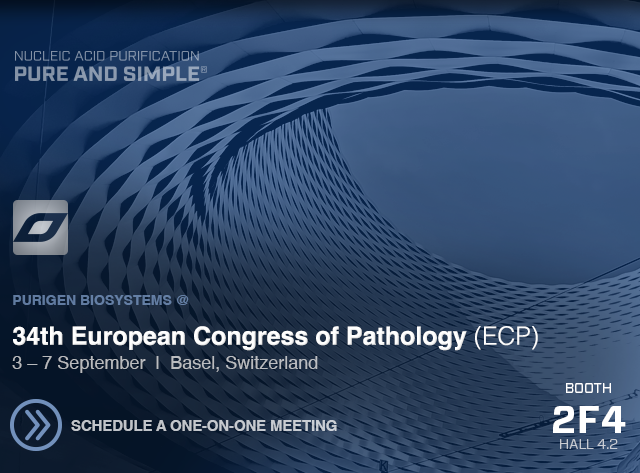
<style>
.page{position:relative;width:640px;height:473px}
.page>*{position:absolute;margin:0}
.t1{font:14px "Helvetica-Bold";color:#617ca2;text-transform:uppercase}
.t2{font:25px "Helvetica-Bold";color:#ffffff}
.t3{font:25px "Helvetica-Light";color:#ffffff}
.t4{font:18px "Helvetica";color:#babdc0}
.t5{font:14px "Forza-Book";color:#ffffff;text-transform:uppercase}
.t6{font:38px "Forza-Bold";color:#ffffff;text-transform:uppercase}
.t7{font:15px "Helvetica-Bold";letter-spacing:-0.01em;color:#c3c7cd;text-transform:uppercase}
.t8{font:14px "Forza-Light";color:#c8cdd3;text-transform:uppercase}
</style>
<div class="page">
<p class="t1" style="left:13px;top:295px;width:176px;height:10px">Purigen Biosystems @</p>
<p class="t2" style="left:13px;top:326px;width:525px;height:25px">34th European Congress of Pathology <span class="t3">(ECP)</span></p>
<p class="t4" style="left:12px;top:356px;width:306px;height:17px">3 – 7 September  |  Basel, Switzerland</p>
<p class="t5" style="left:566px;top:383px;width:45px;height:10px">Booth</p>
<p class="t6" style="left:553px;top:406px;width:73px;height:27px">2F4</p>
<p class="t7" style="left:71px;top:420px;width:266px;height:11px">Schedule a One-On-One Meeting</p>
<p class="t8" style="left:560px;top:439px;width:58px;height:10px">Hall 4.2</p>
</div>
